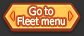
<style>
.page{position:relative;width:84px;height:36px}
.page>*{position:absolute;margin:0}
.t1{font:10px/10px "UDShinGoPro-Medium";letter-spacing:-0.04em;color:#fffbdd;scale:0.9 1}
</style>
<div class="page">
<p class="t1" style="left:17px;top:6px;width:48px;height:20px;text-align:center">Go to<br>Fleet menu</p>
</div>
